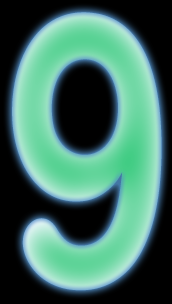
<style>
.page{position:relative;width:172px;height:304px;background:#000000}
.page>*{position:absolute;margin:0}
.t1{font:390px "AGBookRounded-Medium";scale:0.77 1}
</style>
<div class="page">
<p class="t1" style="left:12px;top:12px;width:150px;height:279px">9</p>
</div>
